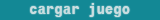
<style>
.page{position:relative;width:160px;height:20px;background:#138895}
.page>*{position:absolute;margin:0}
.t1{font:14px "Monospace821BT-Bold";color:#cadee0}
</style>
<div class="page">
<p class="t1" style="left:30px;top:3px;width:100px;height:14px">cargar juego</p>
</div>
